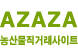
<style>
.page{position:relative;width:78px;height:49px;background:#ffffff}
.page>*{position:absolute;margin:0}
.t1{font:20px "H2gtrE";color:#79a207;font-weight:bold}
.t2{font:10px "H2gtrE";color:#79a207;font-weight:bold;scale:0.84 1}
</style>
<div class="page">
<p class="t1" style="left:0px;top:11px;width:77px;height:17px">AZAZA</p>
<p class="t2" style="left:0px;top:35px;width:78px;height:11px">농산물직거래사이트</p>
</div>
